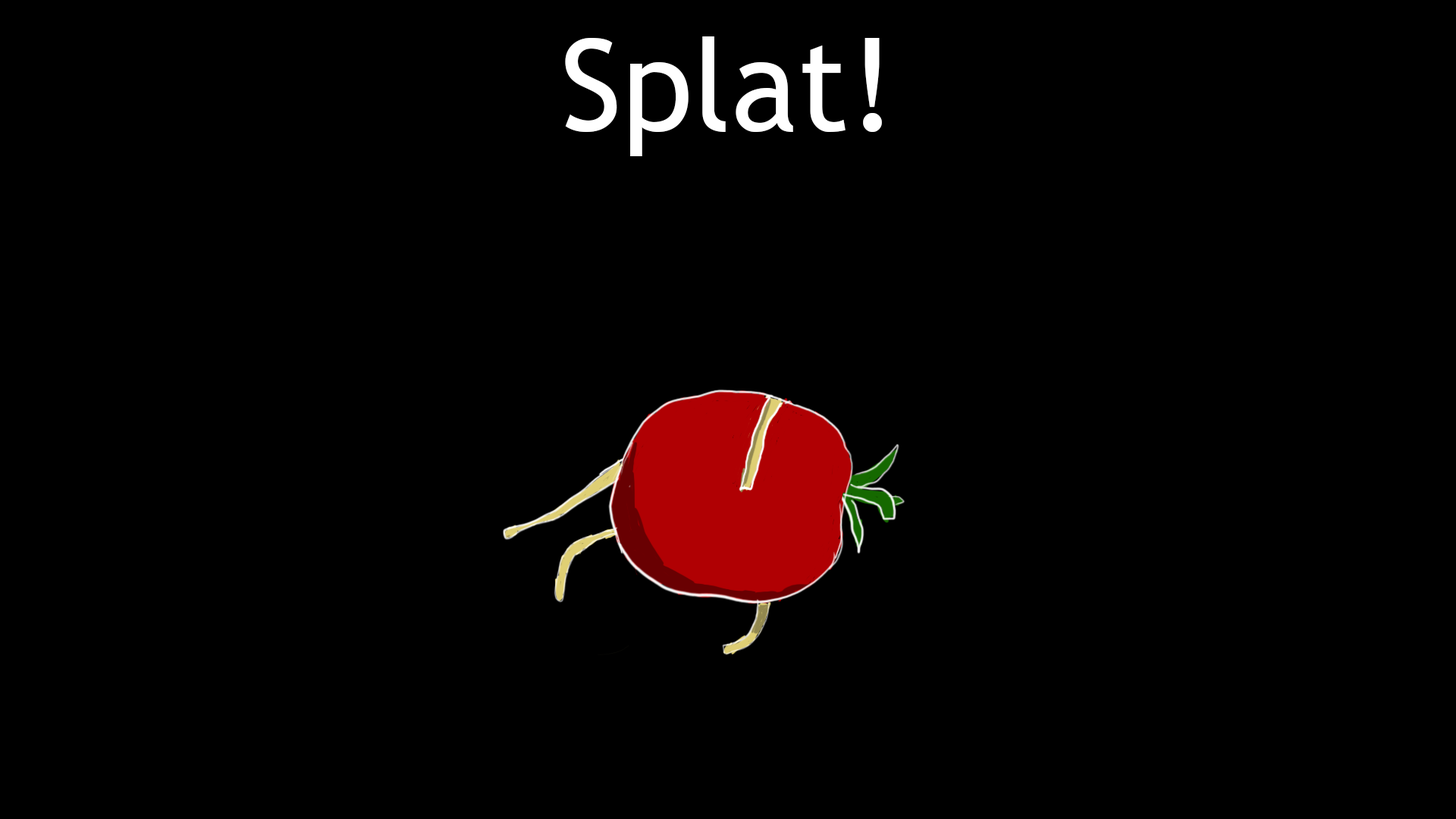
<style>
.page{position:relative;width:1456px;height:819px;background:#000000}
.page>*{position:absolute;margin:0}
.t1{font:127.6px "TrebuchetMS";color:#ffffff}
</style>
<div class="page">
<p class="t1" style="left:565px;top:36px;width:317px;height:120px">Splat!</p>
</div>
